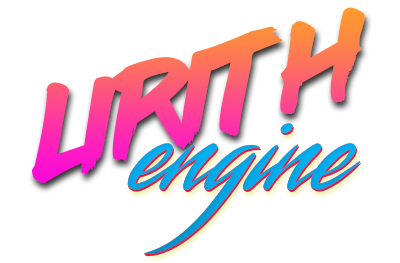
<style>
.page{position:relative;width:400px;height:263px;background:#ffffff}
.page>*{position:absolute;margin:0}
.t1{font:106.3px "lazer84"}
.t2{font:125px "Streamster";color:#02a7e5}
.t3{font:125px "Streamster";color:#02a7e6}
.t4{font:125px "Streamster"}
</style>
<div class="page">
<p class="t1" style="left:31px;top:7px;width:334px;height:176px;rotate:-15deg">Lirith</p>
<p class="t2" style="left:127px;top:124px;width:234px;height:132px">engine</p>
<p class="t3" style="left:127px;top:123px;width:234px;height:132px">engine</p>
<p class="t2" style="left:127px;top:124px;width:234px;height:132px">engine</p>
<p class="t3" style="left:127px;top:123px;width:234px;height:132px">engine</p>
<p class="t4" style="left:128px;top:125px;width:234px;height:132px">engine</p>
<p class="t4" style="left:128px;top:125px;width:234px;height:132px">engine</p>
</div>
